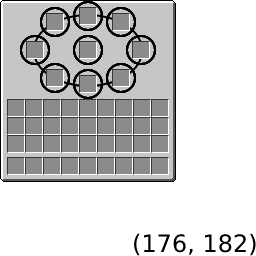
<style>
.page{position:relative;width:256px;height:256px;background:#ffffff}
.page>*{position:absolute;margin:0}
.t1{font:24px "DejaVuSans";color:#000000}
</style>
<div class="page">
<p class="t1" style="left:134px;top:233px;width:122px;height:23px">(176, 182)</p>
</div>
